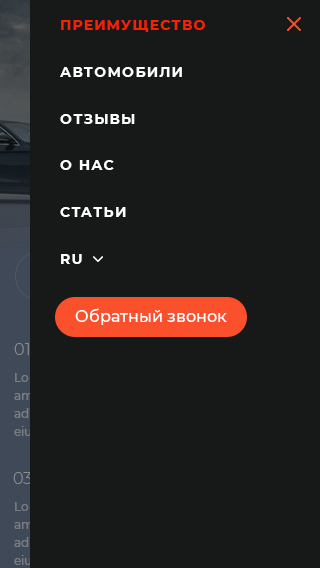
<style>
.page{position:relative;width:320px;height:568px;background:#171919}
.page>*{position:absolute;margin:0}
.t1{font:14px "Montserrat-Bold";letter-spacing:0.1em;color:#ffffff;text-transform:uppercase}
.t2{font:14px "Montserrat-Bold";letter-spacing:0.1em;color:#fa2005;text-transform:uppercase}
.t3{font:16px "Montserrat-Medium";color:#ffffff}
</style>
<div class="page">
<p class="t1" style="left:60px;top:20px;width:145px;height:244px"><span class="t2">Преимущество<br></span>Автомобили<br>Отзывы<br>О нас<br>Статьи<br>RU</p>
<p class="t3" style="left:75px;top:308px;width:152px;height:17px">Обратный звонок</p>
</div>
